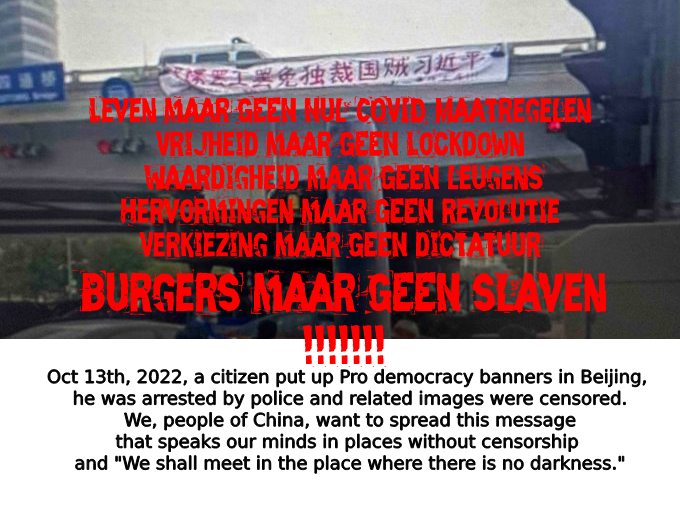
<style>
.page{position:relative;width:680px;height:510px;background:#ffffff}
.page>*{position:absolute;margin:0}
.t1{font:28px "Zero&Zero-Is";color:#ff0000}
.t2{font:44px "Zero&Zero-Is";color:#ff0000}
.t3{font:18px "DejaVuSans";color:#000000}
</style>
<div class="page">
<p class="t1" style="left:72px;top:94px;width:535px;height:273px;text-align:center">Leven maar GEEN Nul-COVID-Maatregelen <br>Vrijheid maar GEEN Lockdown <br>Waardigheid maar GEEN leugens<br>Hervormingen maar GEEN revolutie <br>Verkiezing maar GEEN dictatuur <br><span class="t2">Burgers maar GEEN slaven<br>!!!!!!!</span></p>
<p class="t3" style="left:46px;top:368px;width:601px;height:107px;text-align:center">Oct 13th, 2022, a citizen put up Pro democracy banners in Beijing, <br>he was arrested by police and related images were censored.<br>We, people of China, want to spread this message<br>that speaks our minds in places without censorship <br>and "We shall meet in the place where there is no darkness."</p>
</div>
